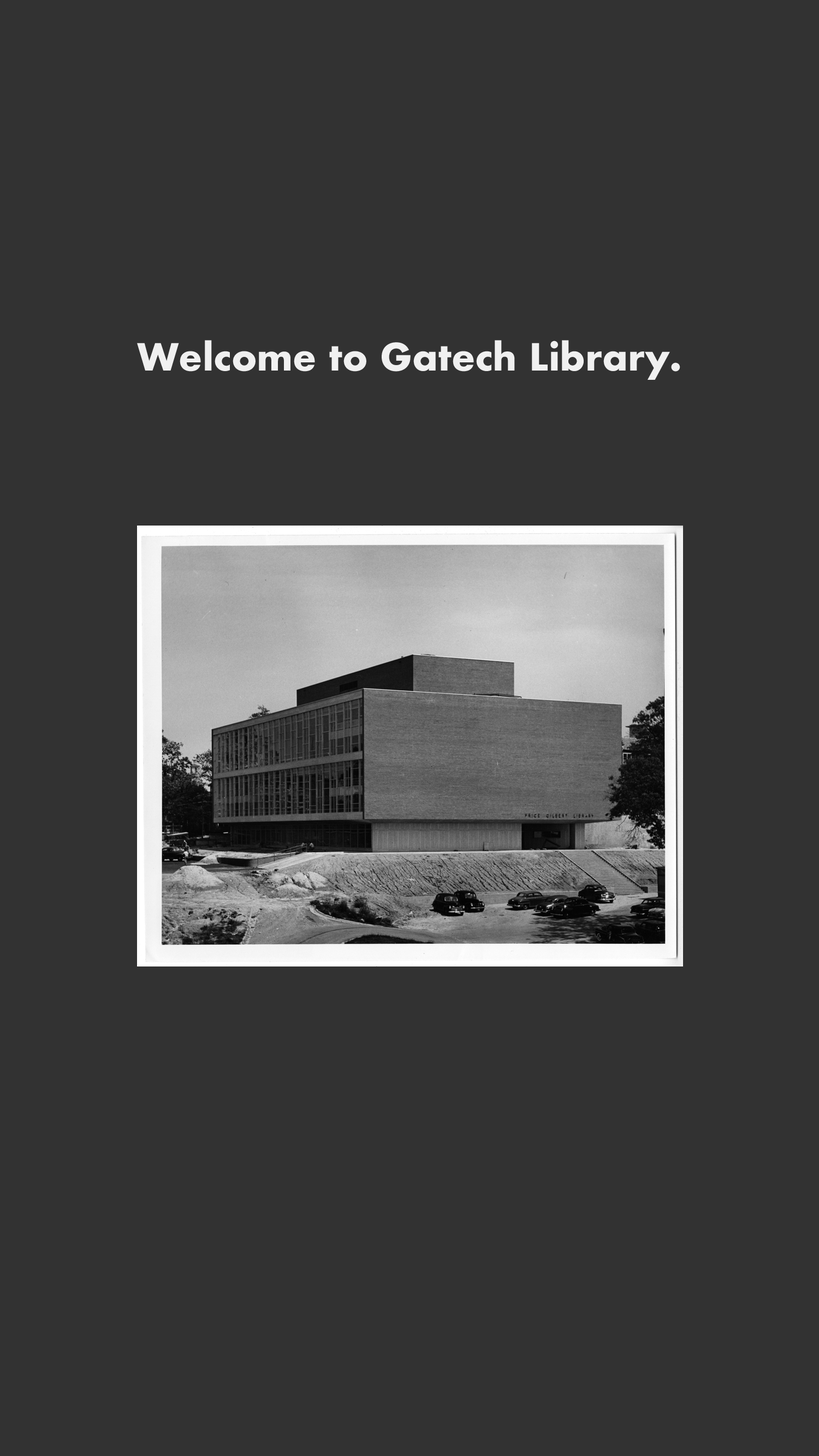
<style>
.page{position:relative;width:819px;height:1456px;background:#323232}
.page>*{position:absolute;margin:0}
.t1{font:36.4px "Futura-Bold";color:#f0f0f0}
</style>
<div class="page">
<p class="t1" style="left:137px;top:340px;width:543px;height:40px">Welcome to Gatech Library.</p>
</div>
